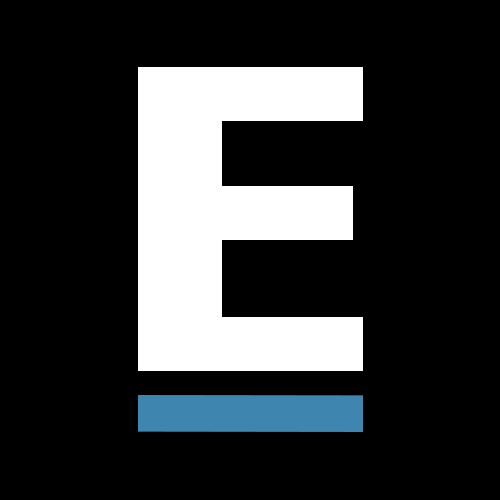
<style>
.page{position:relative;width:500px;height:500px;background:#000000}
.page>*{position:absolute;margin:0}
.t1{font:424px "OpenSans-Bold";color:#ffffff;scale:1.28 1}
</style>
<div class="page">
<p class="t1" style="left:138px;top:67px;width:225px;height:304px">E</p>
</div>
